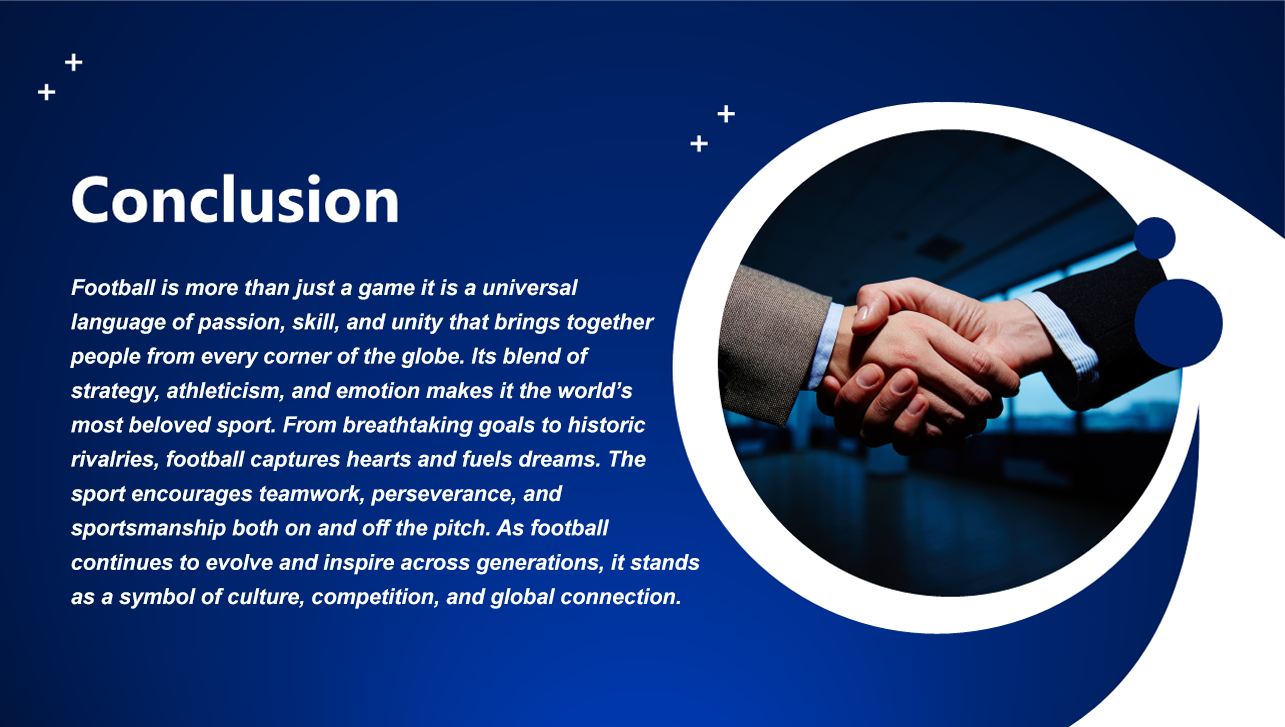
<style>
.page{position:relative;width:1285px;height:727px}
.page>*{position:absolute;margin:0}
.t1{font:21.6px/34.3px "Arial-BoldItalicMT";color:#fbffff}
</style>
<div class="page">
<p class="t1" style="left:70px;top:279px;width:630px;height:330px">Football is more than just a game it is a universal <br>language of passion, skill, and unity that brings together <br>people from every corner of the globe. Its blend of <br>strategy, athleticism, and emotion makes it the world’s <br>most beloved sport. From breathtaking goals to historic <br>rivalries, football captures hearts and fuels dreams. The <br>sport encourages teamwork, perseverance, and <br>sportsmanship both on and off the pitch. As football <br>continues to evolve and inspire across generations, it stands<br>as a symbol of culture, competition, and global connection.</p>
</div>
